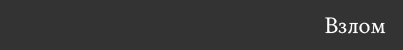
<style>
.page{position:relative;width:403px;height:50px;background:#333333}
.page>*{position:absolute;margin:0}
.t1{font:24px "CrimsonText-Regular";color:#ffffff}
</style>
<div class="page">
<p class="t1" style="left:325px;top:17px;width:61px;height:17px">Взлом</p>
</div>
